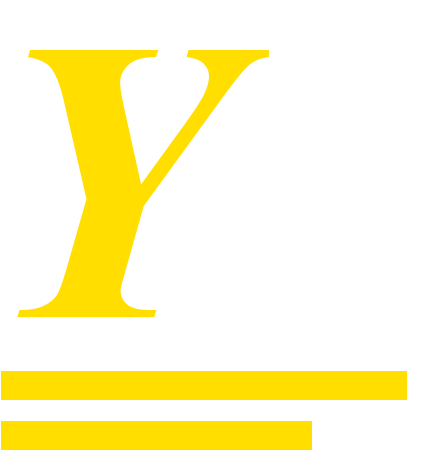
<style>
.page{position:relative;width:448px;height:451px;background:#ffffff}
.page>*{position:absolute;margin:0}
.t1{font:403.1px "TimesNewRomanPS-BoldItalicMT";color:#ffde00}
</style>
<div class="page">
<p class="t1" style="left:17px;top:50px;width:252px;height:267px">Y</p>
</div>
